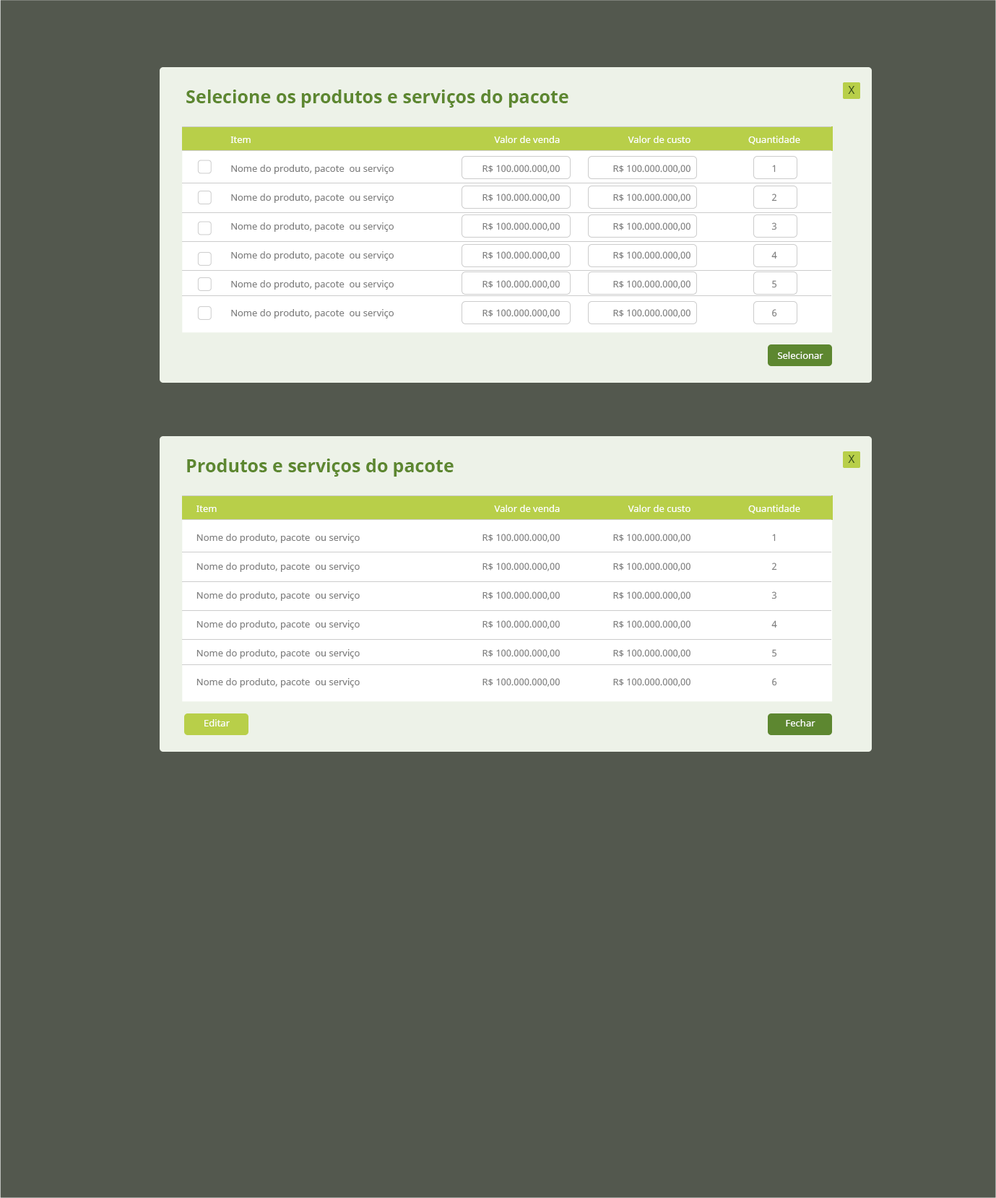
<style>
.page{position:relative;width:996px;height:1198px;background:#53584e}
.page>*{position:absolute;margin:0}
.t1{font:18px "NotoSans-Bold";color:#5d8730}
.t2{font:10.8px "NotoSans";color:#324a1a}
.t3{font:9.4px/28.9px "NotoSans";color:#808080}
.t4{font:9.4px/28.9px "NotoSans";color:#ffffff}
.t5{font:9.4px "NotoSans";color:#ffffff}
</style>
<div class="page">
<p class="t1" style="left:186px;top:90px;width:382px;height:18px">Selecione os produtos e serviços do pacote</p>
<p class="t2" style="left:848px;top:86px;width:7px;height:8px">X</p>
<p class="t3" style="left:230px;top:136px;width:163px;height:182px"><span class="t4">Item<br></span>Nome do produto, pacote  ou serviço<br>Nome do produto, pacote  ou serviço<br>Nome do produto, pacote  ou serviço<br>Nome do produto, pacote  ou serviço<br>Nome do produto, pacote  ou serviço<br>Nome do produto, pacote  ou serviço</p>
<p class="t3" style="left:482px;top:136px;width:78px;height:182px;text-align:right"><span class="t4">Valor de venda<br></span>R$ 100.000.000,00<br>R$ 100.000.000,00<br>R$ 100.000.000,00<br>R$ 100.000.000,00<br>R$ 100.000.000,00<br>R$ 100.000.000,00<br>R$ 100.000.000,00</p>
<p class="t3" style="left:613px;top:136px;width:77px;height:182px;text-align:right"><span class="t4">Valor de custo<br></span>R$ 100.000.000,00<br>R$ 100.000.000,00<br>R$ 100.000.000,00<br>R$ 100.000.000,00<br>R$ 100.000.000,00<br>R$ 100.000.000,00<br>R$ 100.000.000,00</p>
<p class="t5" style="left:778px;top:352px;width:45px;height:7px">Selecionar</p>
<p class="t1" style="left:187px;top:458px;width:266px;height:18px">Produtos e serviços do pacote</p>
<p class="t2" style="left:848px;top:455px;width:7px;height:8px">X</p>
<p class="t3" style="left:196px;top:505px;width:164px;height:182px"><span class="t4">Item<br></span>Nome do produto, pacote  ou serviço<br>Nome do produto, pacote  ou serviço<br>Nome do produto, pacote  ou serviço<br>Nome do produto, pacote  ou serviço<br>Nome do produto, pacote  ou serviço<br>Nome do produto, pacote  ou serviço</p>
<p class="t3" style="left:482px;top:505px;width:78px;height:182px;text-align:right"><span class="t4">Valor de venda<br></span>R$ 100.000.000,00<br>R$ 100.000.000,00<br>R$ 100.000.000,00<br>R$ 100.000.000,00<br>R$ 100.000.000,00<br>R$ 100.000.000,00<br>R$ 100.000.000,00</p>
<p class="t3" style="left:613px;top:505px;width:77px;height:182px;text-align:right"><span class="t4">Valor de custo<br></span>R$ 100.000.000,00<br>R$ 100.000.000,00<br>R$ 100.000.000,00<br>R$ 100.000.000,00<br>R$ 100.000.000,00<br>R$ 100.000.000,00<br>R$ 100.000.000,00</p>
<p class="t3" style="left:748px;top:505px;width:52px;height:181px;text-align:center"><span class="t4">Quantidade<br></span>1<br>2<br>3<br>4<br>5<br>6</p>
<p class="t5" style="left:204px;top:719px;width:26px;height:7px">Editar</p>
<p class="t5" style="left:785px;top:719px;width:30px;height:7px">Fechar</p>
</div>
